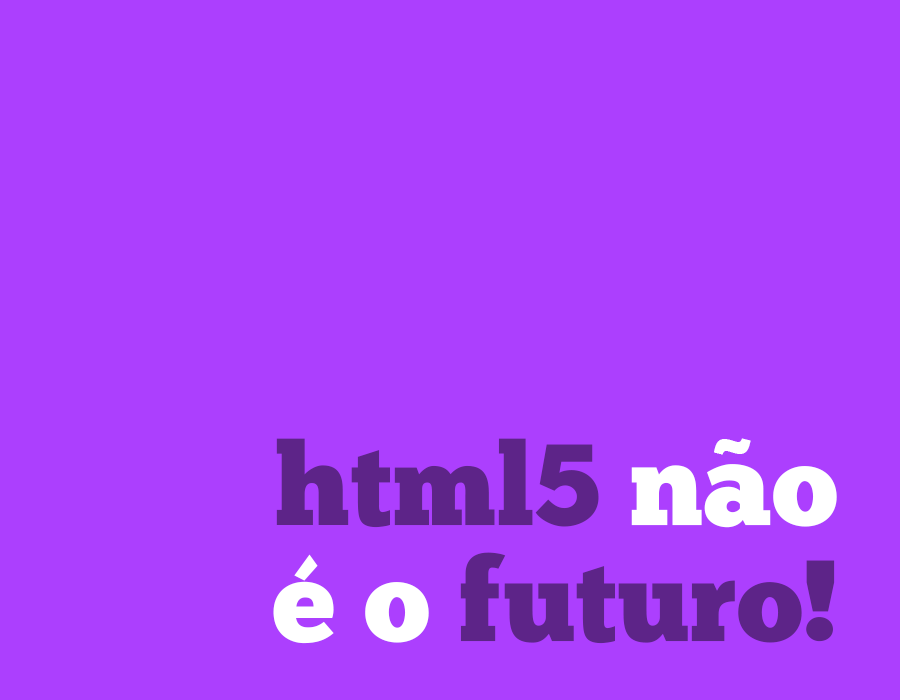
<style>
.page{position:relative;width:900px;height:700px;background:#ac3ffe}
.page>*{position:absolute;margin:0}
.t1{font:115.1px/116.3px "ChunkFive-Roman";color:#ffffff}
.t2{font:115.1px/116.3px "ChunkFive-Roman";color:#5d2488}
.t3{font:84.9px "GothamUltra";color:#ffffff}
</style>
<div class="page">
<p class="t1" style="left:273px;top:438px;width:564px;height:206px;text-align:right"><span class="t2">html5</span> nao<br>é o <span class="t2">futuro!</span></p>
<p class="t3" style="left:714px;top:438px;width:37px;height:17px">~</p>
</div>
